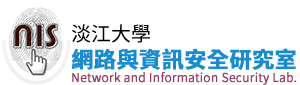
<style>
.page{position:relative;width:300px;height:85px;background:#ffffff}
.page>*{position:absolute;margin:0}
.t1{font:12px "SourceHanSansTC-Normal";color:#963d61;font-weight:bold}
.t2{font:20px "SourceHanSansTC-Regular";color:#000000}
.t3{font:22px "SourceHanSansTC-Bold";color:#1a8ccd;font-weight:bold}
</style>
<div class="page">
<p class="t1" style="left:71px;top:24px;width:226px;height:61px"><span class="t2">淡江大學<br></span><span class="t3">網路與資訊安全研究室<br></span>Network and Information Security Lab.</p>
</div>
